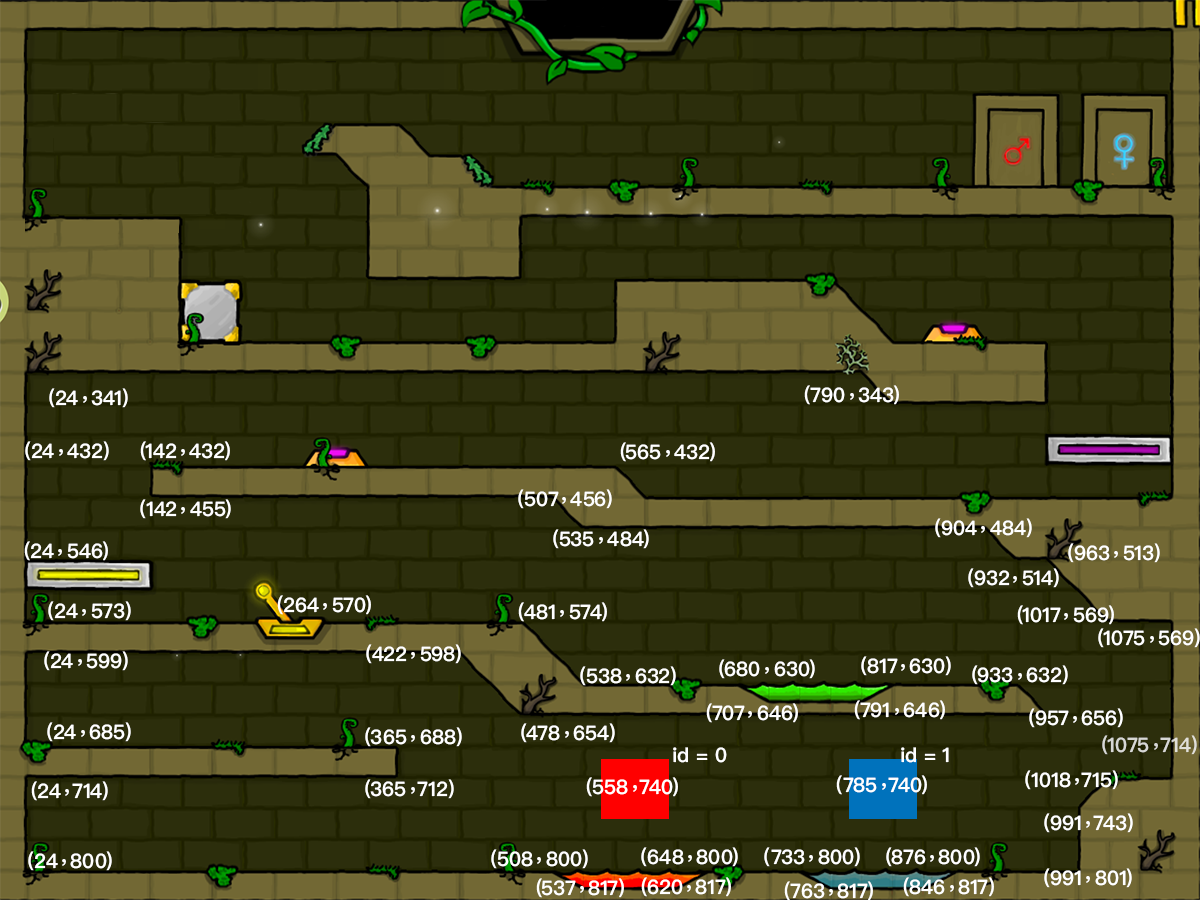
<style>
.page{position:relative;width:1200px;height:900px;background:#2c2e0c}
.page>*{position:absolute;margin:0}
.t1{font:20px "PingFangHK-Semibold";color:#ffffff}
.t2{font:20px "PingFangHK-Semibold";color:#d7d8d5}
</style>
<div class="page">
<p class="t1" style="left:49px;top:388px;width:79px;height:20px">（24，341）</p>
<p class="t1" style="left:804px;top:385px;width:95px;height:20px">(790，343)</p>
<p class="t1" style="left:25px;top:441px;width:84px;height:20px">（24，432）</p>
<p class="t1" style="left:140px;top:441px;width:90px;height:20px">(142，432)</p>
<p class="t1" style="left:620px;top:442px;width:95px;height:20px">(565，432)</p>
<p class="t1" style="left:518px;top:489px;width:94px;height:20px">（507，456）</p>
<p class="t1" style="left:140px;top:499px;width:91px;height:20px">（142，455）</p>
<p class="t1" style="left:935px;top:518px;width:97px;height:20px">（904，484）</p>
<p class="t1" style="left:553px;top:529px;width:96px;height:20px">（535，484）</p>
<p class="t1" style="left:24px;top:541px;width:84px;height:20px">(24，546)</p>
<p class="t1" style="left:1068px;top:543px;width:92px;height:20px">（963，513）</p>
<p class="t1" style="left:968px;top:568px;width:91px;height:20px">（932，514）</p>
<p class="t1" style="left:48px;top:601px;width:83px;height:20px">（24，573）</p>
<p class="t1" style="left:277px;top:595px;width:94px;height:20px">(264，570)</p>
<p class="t1" style="left:518px;top:602px;width:89px;height:20px">(481，574)</p>
<p class="t1" style="left:1017px;top:605px;width:97px;height:20px">(1017，569)</p>
<p class="t1" style="left:1098px;top:628px;width:102px;height:20px">（1075，569）</p>
<p class="t1" style="left:44px;top:651px;width:84px;height:20px">（24，599）</p>
<p class="t1" style="left:366px;top:644px;width:95px;height:20px">（422，598）</p>
<p class="t1" style="left:719px;top:659px;width:96px;height:20px">（680，630）</p>
<p class="t1" style="left:861px;top:656px;width:90px;height:20px">（817，630）</p>
<p class="t1" style="left:972px;top:665px;width:96px;height:20px">（933，632）</p>
<p class="t1" style="left:580px;top:666px;width:96px;height:20px">（538，632）</p>
<p class="t1" style="left:854px;top:700px;width:91px;height:20px">(791，646)</p>
<p class="t1" style="left:706px;top:703px;width:92px;height:20px">(707，646)</p>
<p class="t1" style="left:1029px;top:708px;width:94px;height:20px">（957，656）</p>
<p class="t1" style="left:47px;top:722px;width:84px;height:20px">（24，685）</p>
<p class="t1" style="left:521px;top:723px;width:94px;height:20px">（478，654）</p>
<p class="t1" style="left:365px;top:727px;width:97px;height:20px">（365，688）</p>
<p class="t2" style="left:1102px;top:735px;width:95px;height:20px">（1075，714）</p>
<p class="t1" style="left:673px;top:747px;width:54px;height:16px">id = 0</p>
<p class="t1" style="left:901px;top:747px;width:48px;height:16px">id = 1</p>
<p class="t1" style="left:1025px;top:770px;width:93px;height:20px">（1018，715）</p>
<p class="t1" style="left:31px;top:781px;width:77px;height:20px">(24，714）</p>
<p class="t1" style="left:365px;top:779px;width:89px;height:20px">（365，712）</p>
<p class="t1" style="left:586px;top:777px;width:92px;height:20px">(558，740)</p>
<p class="t1" style="left:836px;top:775px;width:91px;height:20px">(785，740)</p>
<p class="t1" style="left:1044px;top:813px;width:89px;height:20px">（991，743）</p>
<p class="t1" style="left:28px;top:851px;width:84px;height:20px">（24，800）</p>
<p class="t1" style="left:491px;top:849px;width:97px;height:20px">（508，800）</p>
<p class="t1" style="left:641px;top:847px;width:97px;height:20px">（648，800）</p>
<p class="t1" style="left:764px;top:847px;width:96px;height:20px">（733，800）</p>
<p class="t1" style="left:886px;top:847px;width:94px;height:20px">（876，800）</p>
<p class="t1" style="left:1044px;top:868px;width:88px;height:20px">（991，801）</p>
<p class="t1" style="left:536px;top:878px;width:88px;height:20px">(537，817)</p>
<p class="t1" style="left:641px;top:877px;width:90px;height:20px">(620，817)</p>
<p class="t1" style="left:784px;top:881px;width:89px;height:20px">(763，817)</p>
<p class="t1" style="left:903px;top:877px;width:91px;height:20px">(846，817)</p>
</div>
